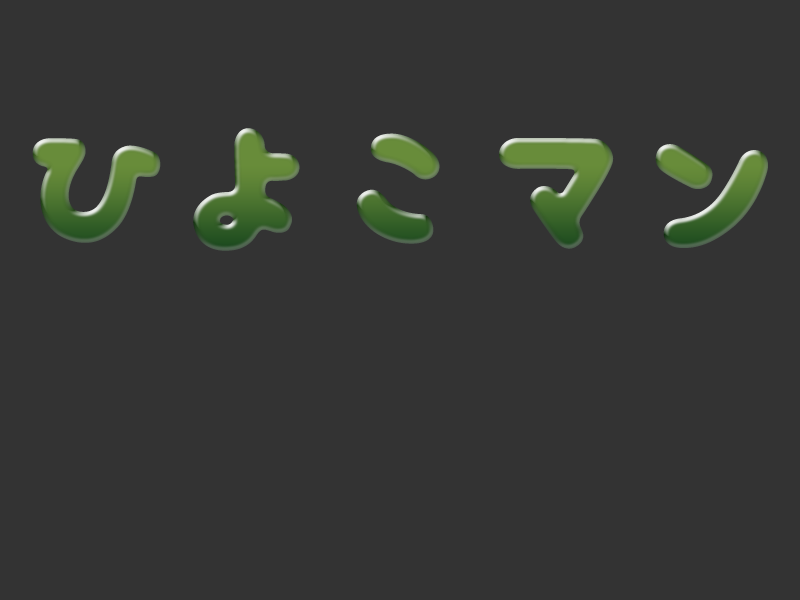
<style>
.page{position:relative;width:800px;height:600px;background:#333333}
.page>*{position:absolute;margin:0}
.t1{font:150px "mini-wakuwaku-maru";font-weight:bold}
</style>
<div class="page">
<p class="t1" style="left:32px;top:128px;width:736px;height:123px">ひよこマン</p>
</div>
